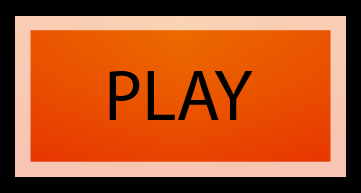
<style>
.page{position:relative;width:361px;height:193px;background:#000000}
.page>*{position:absolute;margin:0}
.t1{font:72px "MyriadPro-Regular";color:#000000}
</style>
<div class="page">
<p class="t1" style="left:109px;top:71px;width:144px;height:49px">PLAY</p>
</div>
